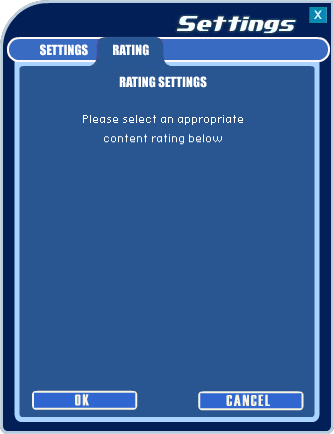
<style>
.page{position:relative;width:334px;height:434px;background:#295691}
.page>*{position:absolute;margin:0}
.t1{font:13px "Impact";color:#ffffff}
.t2{font:16px "Foxley816";color:#ffffff}
</style>
<div class="page">
<p class="t1" style="left:40px;top:44px;width:48px;height:12px">SETTINGS</p>
<p class="t1" style="left:113px;top:44px;width:36px;height:12px">RATING</p>
<p class="t1" style="left:119px;top:76px;width:88px;height:12px">RATING SETTINGS</p>
<p class="t2" style="left:83px;top:115px;width:160px;height:30px;text-align:center">Please select an appropriate<br>content rating below</p>
</div>
